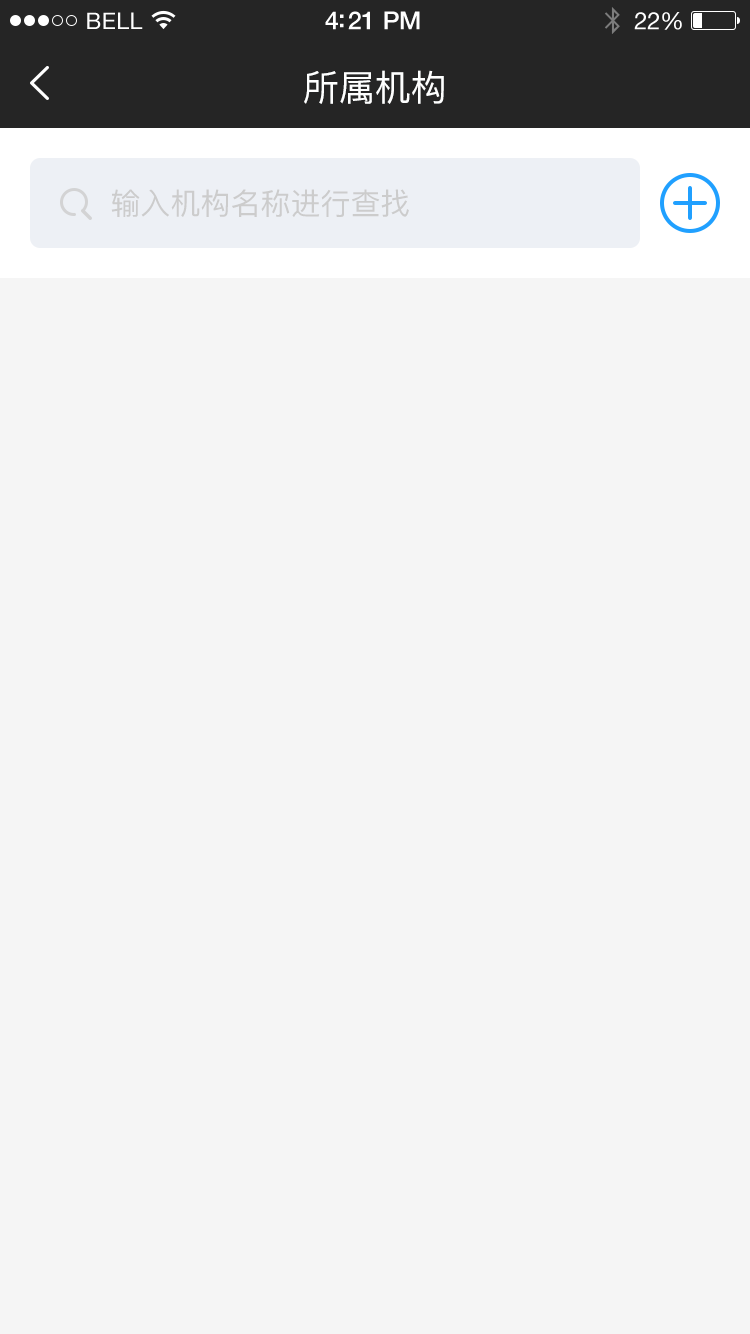
<style>
.page{position:relative;width:750px;height:1334px;background:#f5f5f5}
.page>*{position:absolute;margin:0}
.t1{font:23px "HelveticaNeue";letter-spacing:0.02em;color:#ffffff}
.t2{font:25px "HelveticaNeue-Medium";letter-spacing:-0.02em;color:#ffffff}
.t3{font:24px "HelveticaNeue";letter-spacing:-0.02em;color:#ffffff}
.t4{font:36px "PingFang-SC-Medium";color:#feffff}
.t5{font:30px "PingFang-SC-Medium";color:#cccccc}
</style>
<div class="page">
<p class="t1" style="left:87px;top:12px;width:56px;height:17px">BELL</p>
<p class="t2" style="left:325px;top:11px;width:95px;height:19px">4:21 PM</p>
<p class="t3" style="left:634px;top:12px;width:48px;height:18px">22%</p>
<p class="t4" style="left:304px;top:70px;width:140px;height:34px">所属机构</p>
<p class="t5" style="left:111px;top:189px;width:298px;height:28px">输入机构名称进行查找</p>
</div>
